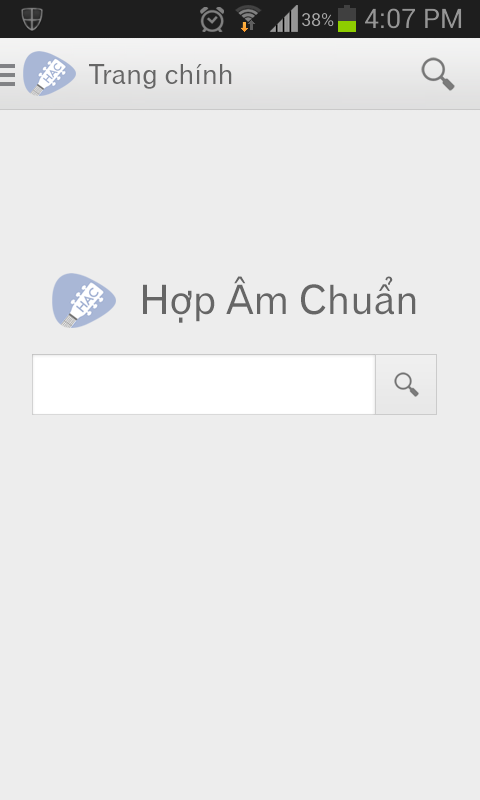
<style>
.page{position:relative;width:480px;height:800px;background:#ededed}
.page>*{position:absolute;margin:0}
.t1{font:27px "UVNGioMay";color:#666666}
.t2{font:40px "UVNGioMay";color:#666666}
</style>
<div class="page">
<p class="t1" style="left:89px;top:64px;width:143px;height:25px">Trang chính</p>
<p class="t2" style="left:143px;top:276px;width:273px;height:47px">Hợp Âm Chuẩn</p>
</div>
